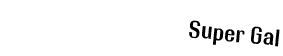
<style>
.page{position:relative;width:283px;height:56px;background:#ffffff}
.page>*{position:absolute;margin:0}
.t1{font:24px "RolloutPlain";color:#000000}
</style>
<div class="page">
<p class="t1" style="left:189px;top:20px;width:91px;height:27px;rotate:6deg">Super Gal</p>
</div>
